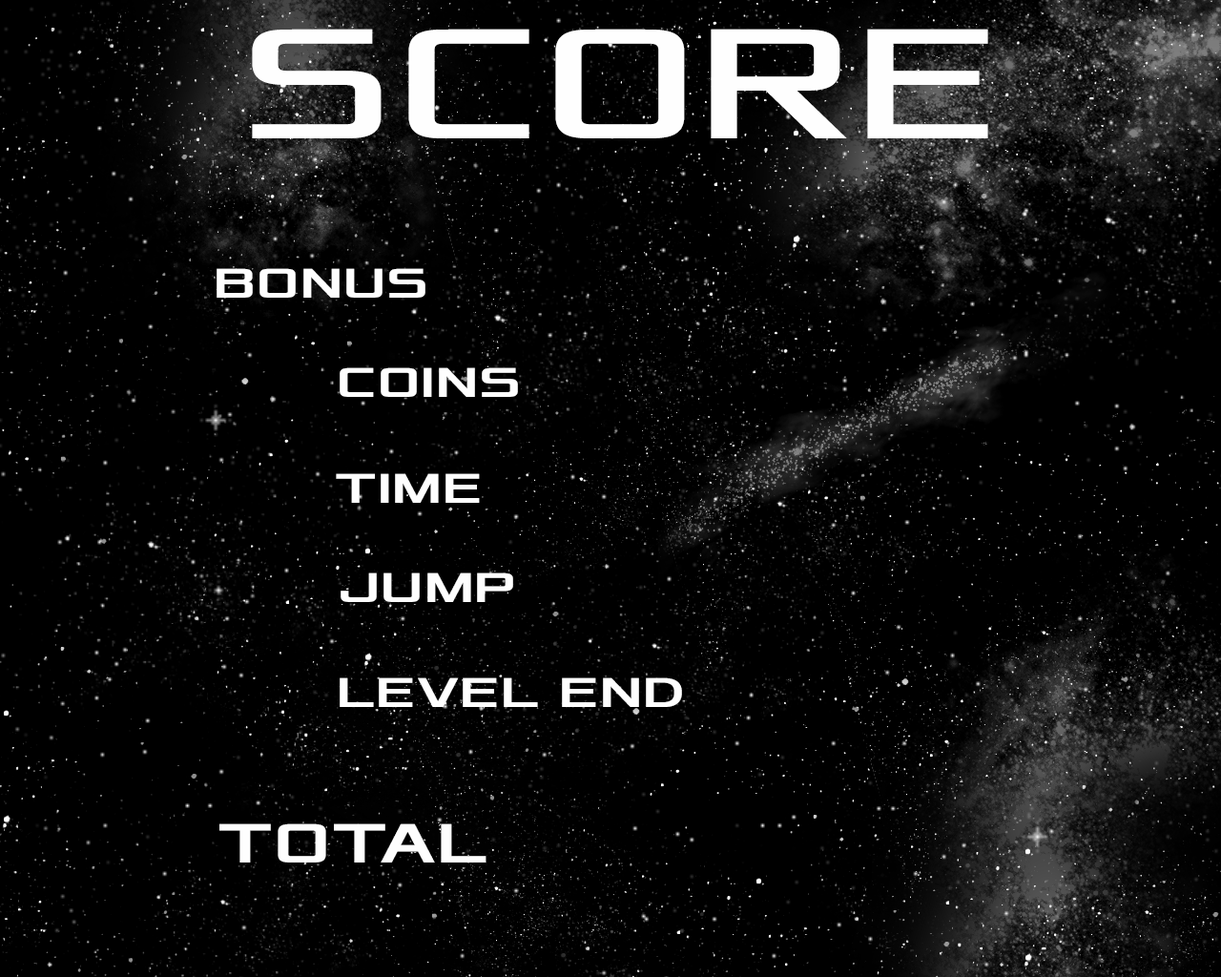
<style>
.page{position:relative;width:1221px;height:977px;background:#000000}
.page>*{position:absolute;margin:0}
.t1{font:164.7px "Xolonium";letter-spacing:0.02em;color:#fefefe;text-transform:uppercase;scale:1.04 1}
.t2{font:43.6px "Xolonium-Bold";letter-spacing:0.02em;color:#fefefe;text-transform:uppercase;scale:1.04 1}
.t3{font:58.1px "Xolonium-Bold";letter-spacing:0.02em;color:#fefefe;text-transform:uppercase;scale:1.04 1}
</style>
<div class="page">
<p class="t1" style="left:252px;top:29px;width:736px;height:109px">SCORE</p>
<p class="t2" style="left:217px;top:268px;width:208px;height:30px">BONUS</p>
<p class="t2" style="left:340px;top:367px;width:178px;height:30px">COINS</p>
<p class="t2" style="left:336px;top:473px;width:144px;height:30px">TIME</p>
<p class="t2" style="left:341px;top:572px;width:172px;height:30px">JUMP</p>
<p class="t2" style="left:340px;top:677px;width:342px;height:30px">LEVEL END</p>
<p class="t3" style="left:219px;top:823px;width:267px;height:39px">TOTAL</p>
</div>
